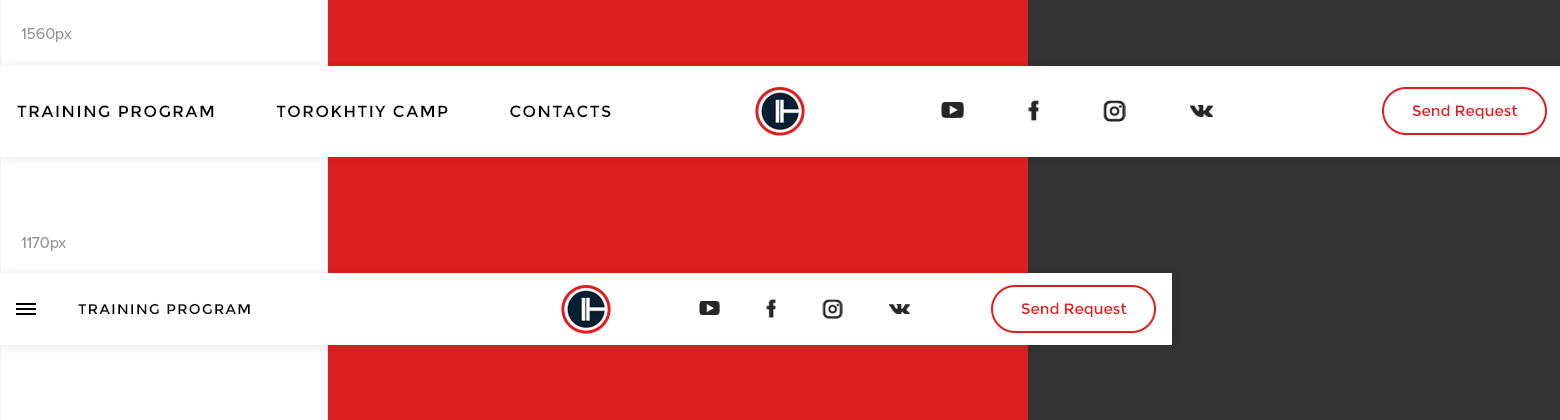
<style>
.page{position:relative;width:1560px;height:420px;background:#ffffff}
.page>*{position:absolute;margin:0}
.t1{font:16px "ProximaNova-Regular";color:#949494}
.t2{font:16px "Montserrat-Regular";letter-spacing:0.1em;color:#000000;text-transform:uppercase}
.t3{font:15px "Montserrat-Regular";color:#df1f1f}
.t4{font:14px "Montserrat-Regular";letter-spacing:0.1em;color:#000000;text-transform:uppercase}
</style>
<div class="page">
<p class="t1" style="left:21px;top:28px;width:51px;height:14px">1560px</p>
<p class="t2" style="left:17px;top:105px;width:594px;height:13px">Training Program          TOROKHTIY Camp          CONTACTS</p>
<p class="t3" style="left:1412px;top:104px;width:106px;height:16px">Send Request</p>
<p class="t1" style="left:21px;top:237px;width:45px;height:14px">1170px</p>
<p class="t4" style="left:78px;top:303px;width:172px;height:12px">Training Program</p>
<p class="t3" style="left:1021px;top:302px;width:106px;height:16px">Send Request</p>
</div>
